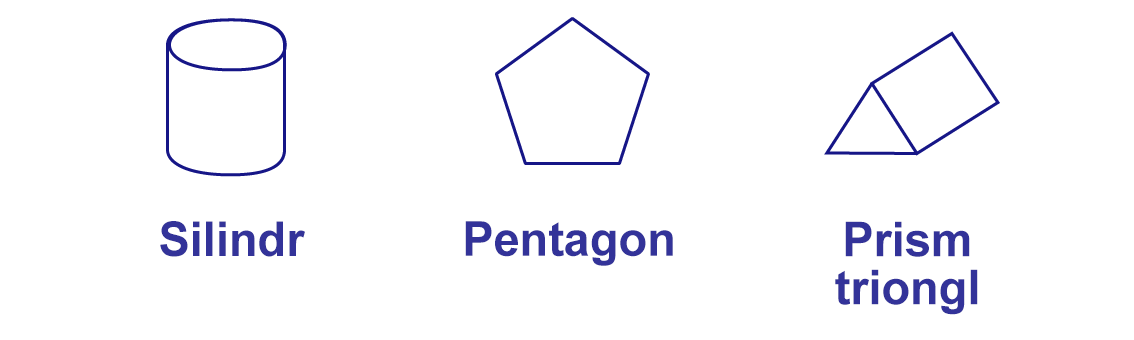
<style>
.page{position:relative;width:1134px;height:340px;background:#ffffff}
.page>*{position:absolute;margin:0}
.t1{font:48px "Arial-BoldMT";color:#333399}
.t2{font:48px/48px "Arial-BoldMT";color:#333399}
</style>
<div class="page">
<p class="t1" style="left:160px;top:221px;width:145px;height:36px">Silindr</p>
<p class="t1" style="left:465px;top:221px;width:208px;height:45px">Pentagon</p>
<p class="t2" style="left:835px;top:221px;width:143px;height:94px;text-align:center">Prism<br>triongl</p>
</div>
